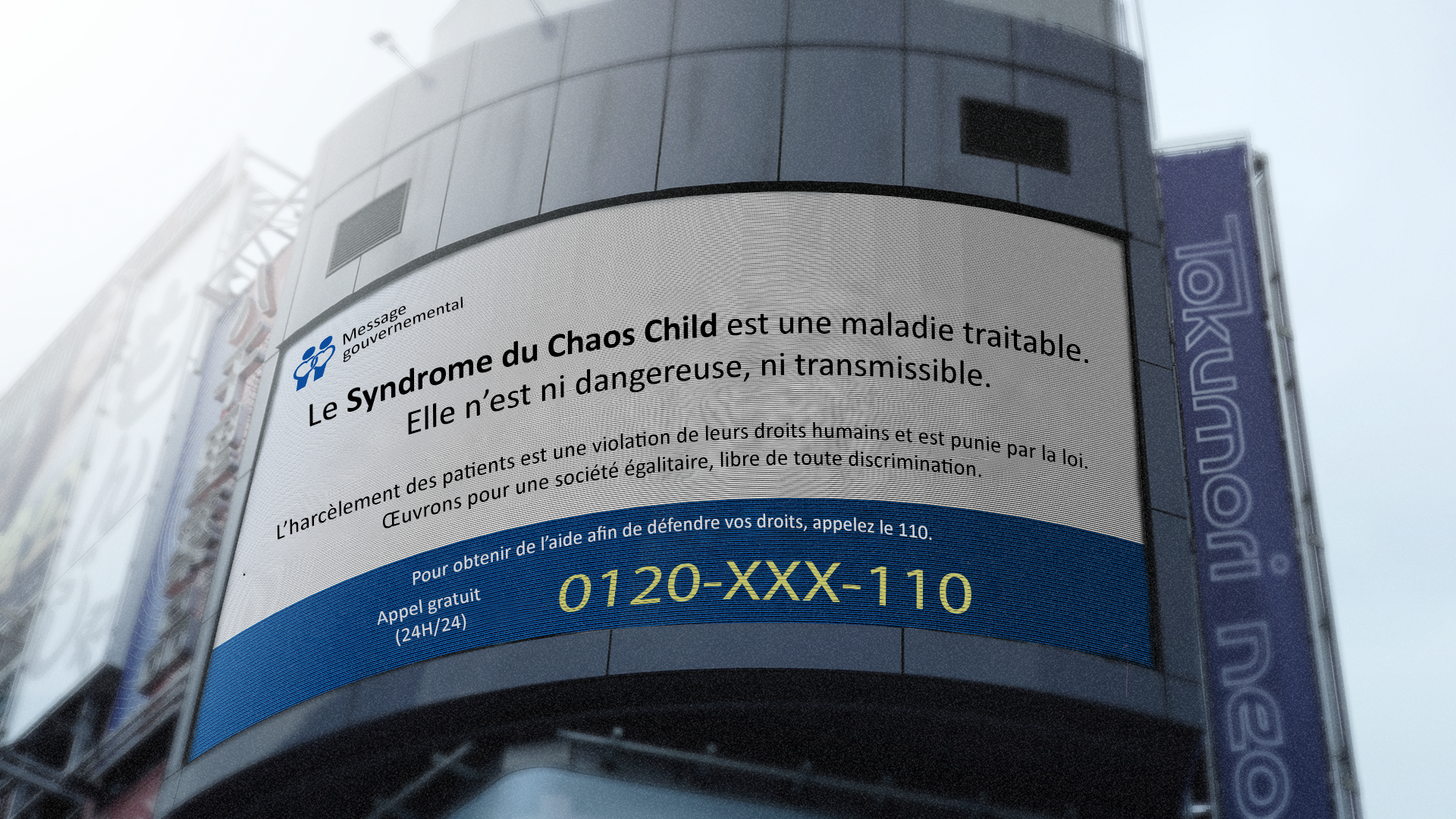
<style>
.page{position:relative;width:1456px;height:819px}
.page>*{position:absolute;margin:0}
.t1{font:16.6px/14.6px "Calibri";color:#000000;scale:1.2 1}
.t2{font:34.8px "Calibri";color:#000000}
.t3{font:34.8px "Calibri-Bold";color:#000000}
.t4{font:22.7px "Calibri";color:#000000}
.t5{font:20.2px "Calibri";color:#d0d2d5}
.t6{font:19.7px "Calibri";color:#d0d2d5;scale:1.03 1}
</style>
<div class="page">
<p class="t1" style="left:343px;top:297px;width:120px;height:65px;rotate:-24deg">Message<br>gouvernemental</p>
<p class="t2" style="left:309px;top:312px;width:779px;height:123px;text-align:center;rotate:-5deg">Le <span class="t3">Syndrome du Chaos Child</span> est une maladie traitable.<br>Elle n’est ni dangereuse, ni transmissible.</p>
<p class="t4" style="left:277px;top:422px;width:810px;height:118px;text-align:center;rotate:-5deg">L’harcèlement des patients est une violation de leurs droits humains et est punie par la loi.<br>Œuvrons pour une société égalitaire, libre de toute discrimination.</p>
<p class="t5" style="left:413px;top:513px;width:519px;height:72px;rotate:-5deg">Pour obtenir de l’aide afin de défendre vos droits, appelez le 110.</p>
<p class="t6" style="left:377px;top:588px;width:104px;height:58px;text-align:center;rotate:-14deg">Appel gratuit<br>(24H/24)</p>
</div>
